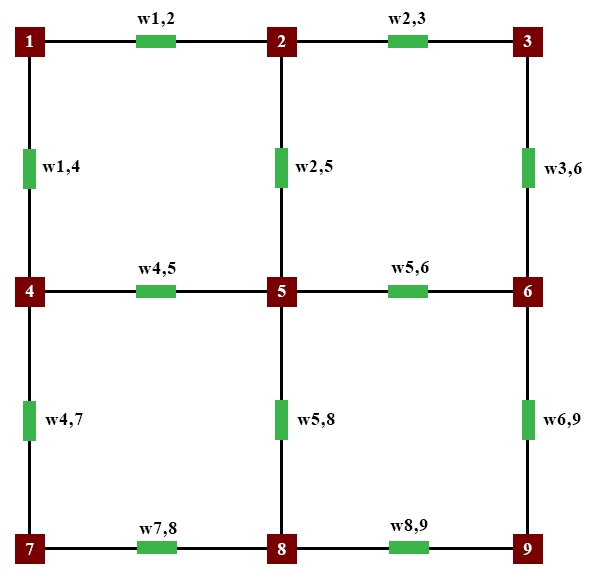
<style>
.page{position:relative;width:592px;height:585px;background:#ffffff}
.page>*{position:absolute;margin:0}
.t1{font:18px "TimesNewRomanPS-BoldMT";letter-spacing:0.05em;color:#000000}
.t2{font:18px "TimesNewRomanPS-BoldMT";letter-spacing:0.05em;color:#ffffff}
</style>
<div class="page">
<p class="t1" style="left:137px;top:12px;width:38px;height:15px">w1,2</p>
<p class="t1" style="left:388px;top:12px;width:38px;height:15px">w2,3</p>
<p class="t2" style="left:26px;top:35px;width:7px;height:12px">1</p>
<p class="t2" style="left:277px;top:35px;width:9px;height:12px">2</p>
<p class="t2" style="left:523px;top:35px;width:9px;height:12px">3</p>
<p class="t1" style="left:42px;top:160px;width:38px;height:15px">w1,4</p>
<p class="t1" style="left:295px;top:160px;width:38px;height:15px">w2,5</p>
<p class="t1" style="left:544px;top:162px;width:38px;height:15px">w3,6</p>
<p class="t1" style="left:138px;top:262px;width:38px;height:15px">w4,5</p>
<p class="t1" style="left:391px;top:261px;width:38px;height:15px">w5,6</p>
<p class="t2" style="left:25px;top:285px;width:9px;height:12px">4</p>
<p class="t2" style="left:277px;top:285px;width:9px;height:12px">5</p>
<p class="t2" style="left:523px;top:285px;width:9px;height:12px">6</p>
<p class="t1" style="left:45px;top:413px;width:38px;height:15px">w4,7</p>
<p class="t1" style="left:297px;top:413px;width:38px;height:15px">w5,8</p>
<p class="t1" style="left:543px;top:413px;width:38px;height:15px">w6,9</p>
<p class="t1" style="left:390px;top:519px;width:38px;height:15px">w8,9</p>
<p class="t1" style="left:139px;top:522px;width:38px;height:15px">w7,8</p>
<p class="t2" style="left:25px;top:543px;width:9px;height:12px">7</p>
<p class="t2" style="left:277px;top:543px;width:9px;height:12px">8</p>
<p class="t2" style="left:523px;top:543px;width:9px;height:12px">9</p>
</div>
